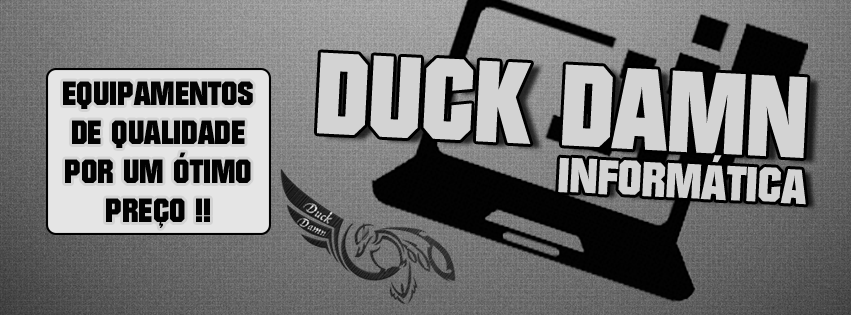
<style>
.page{position:relative;width:851px;height:315px}
.page>*{position:absolute;margin:0}
.t1{font:111.8px "Autumn";color:#d3d3d3;scale:0.94 1}
.t2{font:32.6px "Autumn";color:#020202}
.t3{font:47.8px "Autumn";color:#d3d3d3}
</style>
<div class="page">
<p class="t1" style="left:317px;top:52px;width:491px;height:106px;rotate:3deg">DUCK DAMN</p>
<p class="t2" style="left:63px;top:81px;width:190px;height:147px;text-align:center">EQUIPAMENTOS<br>DE QUALIDADE<br>POR UM ÓTIMO<br>PREÇO !!</p>
<p class="t3" style="left:558px;top:155px;width:248px;height:50px;rotate:3deg">INFORMÁTICA</p>
</div>
